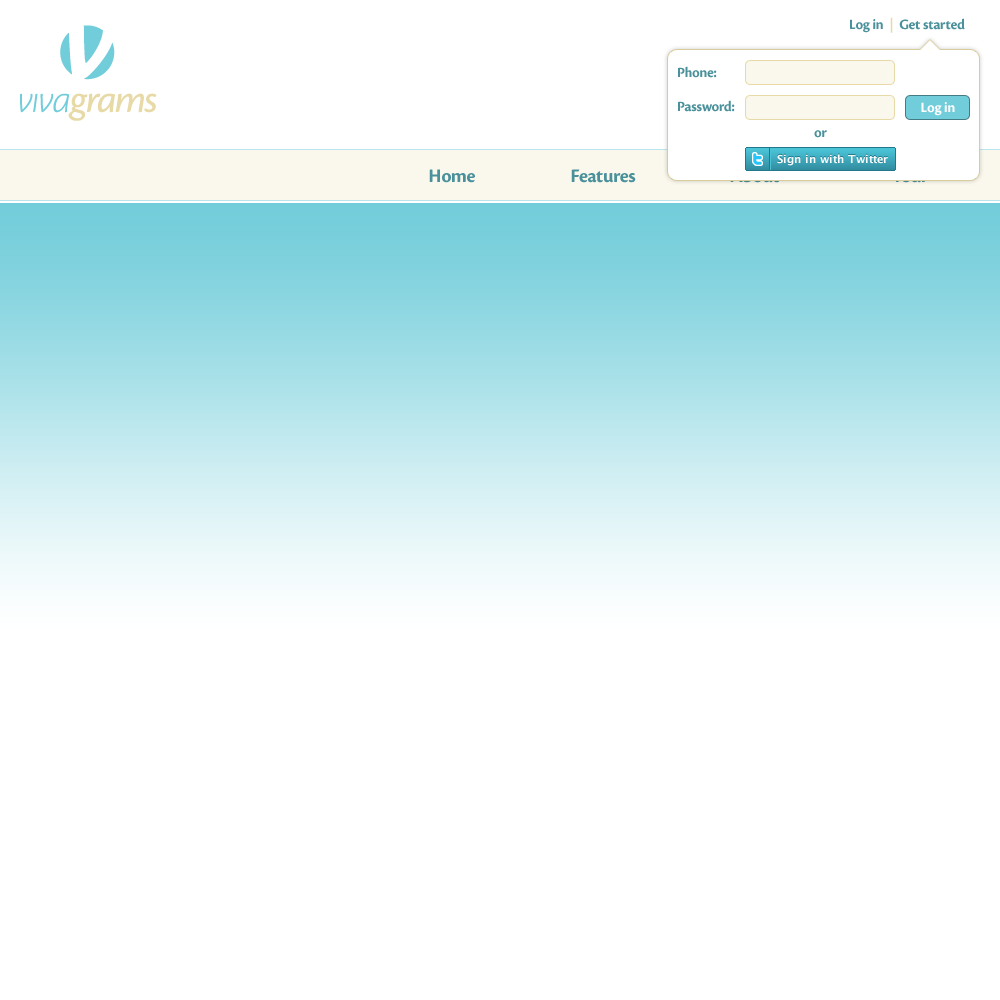
<style>
.page{position:relative;width:1000px;height:1000px;background:#ffffff}
.page>*{position:absolute;margin:0}
.t1{font:15px "CronosPro-Bold";letter-spacing:-0.02em;color:#4b919b}
.t2{font:15px "CronosPro-Bold";letter-spacing:-0.02em;color:#e7daa7}
.t3{font:15px "CronosPro-Bold";letter-spacing:-0.02em;color:#ffffff}
.t4{font:20px "CronosPro-Bold";letter-spacing:-0.02em;color:#4b919b}
</style>
<div class="page">
<p class="t1" style="left:850px;top:17px;width:115px;height:16px">Log in  <span class="t2">|</span>  Get started</p>
<p class="t1" style="left:678px;top:66px;width:39px;height:12px">Phone:</p>
<p class="t1" style="left:678px;top:100px;width:57px;height:12px">Password:</p>
<p class="t3" style="left:921px;top:102px;width:34px;height:14px">Log in</p>
<p class="t1" style="left:814px;top:130px;width:13px;height:8px">or</p>
<p class="t4" style="left:429px;top:169px;width:46px;height:14px">Home</p>
<p class="t4" style="left:571px;top:169px;width:65px;height:14px">Features</p>
</div>
